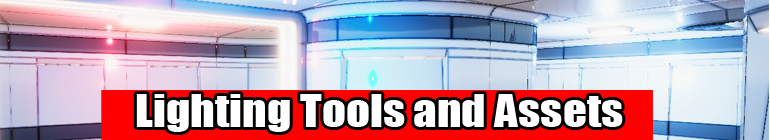
<style>
.page{position:relative;width:770px;height:140px}
.page>*{position:absolute;margin:0}
.t1{font:41.8px "Impact";color:#ffffff;scale:1.13 1}
</style>
<div class="page">
<p class="t1" style="left:136px;top:94px;width:487px;height:38px">Lighting Tools and Assets</p>
</div>
